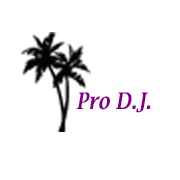
<style>
.page{position:relative;width:180px;height:180px;background:#ffffff}
.page>*{position:absolute;margin:0}
.t1{font:22.7px "LucidaBright-DemiItalic";color:#800080;scale:0.85 1}
</style>
<div class="page">
<p class="t1" style="left:76px;top:92px;width:75px;height:21px">Pro D.J.</p>
</div>
